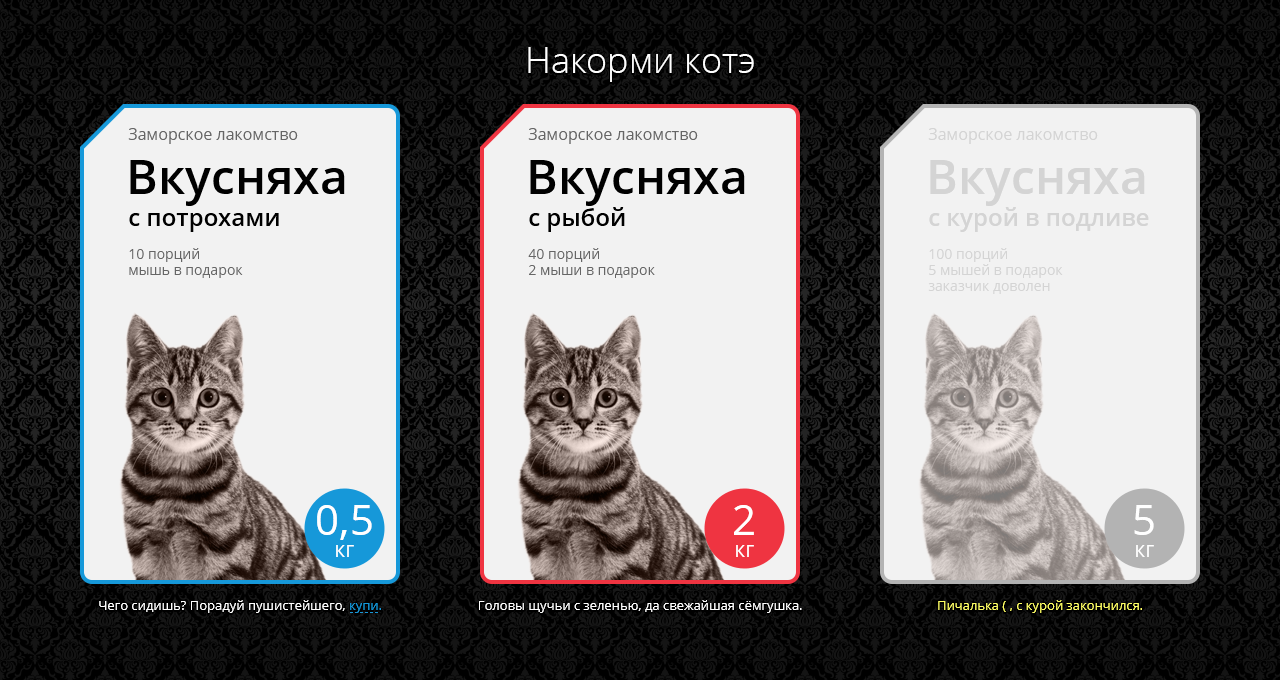
<style>
.page{position:relative;width:1280px;height:680px;background:#f2f2f2}
.page>*{position:absolute;margin:0}
.t1{font:36px "OpenSans-Light";color:#ffffff}
.t2{font:16px "OpenSans";color:#666666}
.t3{font:16px "OpenSans";color:#d4d4d4}
.t4{font:48px "OpenSans-Semibold";color:#000000}
.t5{font:48px "OpenSans-Semibold";color:#d4d4d4}
.t6{font:24px "OpenSans-Semibold";color:#000000}
.t7{font:24px "OpenSans-Semibold";color:#d4d4d4}
.t8{font:14px/16px "OpenSans";color:#666666}
.t9{font:14px/16px "OpenSans";color:#d4d4d4}
.t10{font:42px/22px "OpenSans";color:#ffffff}
.t11{font:21px/22px "OpenSans";color:#ffffff}
.t12{font:13px "OpenSans";color:#ffffff}
.t13{font:13px "OpenSans";color:#1698d9}
.t14{font:13px "OpenSans";color:#ffff66}
</style>
<div class="page">
<p class="t1" style="left:528px;top:47px;width:226px;height:35px">Накорми котэ</p>
<p class="t2" style="left:128px;top:128px;width:170px;height:16px">Заморское лакомство</p>
<p class="t2" style="left:528px;top:128px;width:170px;height:16px">Заморское лакомство</p>
<p class="t3" style="left:928px;top:128px;width:170px;height:16px">Заморское лакомство</p>
<p class="t4" style="left:130px;top:160px;width:215px;height:46px">Вкусняха</p>
<p class="t4" style="left:530px;top:160px;width:215px;height:46px">Вкусняха</p>
<p class="t5" style="left:930px;top:160px;width:215px;height:46px">Вкусняха</p>
<p class="t6" style="left:529px;top:207px;width:96px;height:25px">с рыбой</p>
<p class="t7" style="left:929px;top:207px;width:220px;height:25px">с курой в подливе</p>
<p class="t6" style="left:129px;top:213px;width:150px;height:19px">с потрохами</p>
<p class="t8" style="left:129px;top:248px;width:114px;height:30px">10 порций<br>мышь в подарок</p>
<p class="t8" style="left:528px;top:248px;width:127px;height:30px">40 порций<br>2 мыши в подарок</p>
<p class="t9" style="left:928px;top:248px;width:135px;height:46px">100 порций<br>5 мышей в подарок<br>заказчик доволен</p>
<p class="t10" style="left:317px;top:505px;width:55px;height:52px;text-align:center">0,5<br><span class="t11">кг</span></p>
<p class="t11" style="left:734px;top:505px;width:20px;height:52px;text-align:center"><span class="t10">2<br></span>кг</p>
<p class="t11" style="left:1134px;top:505px;width:20px;height:52px;text-align:center"><span class="t10">5<br></span>кг</p>
<p class="t12" style="left:99px;top:600px;width:282px;height:13px">Чего сидишь? Порадуй пушистейшего, <span class="t13">купи.</span></p>
<p class="t12" style="left:479px;top:600px;width:323px;height:13px">Головы щучьи с зеленью, да свежайшая сёмгушка.</p>
<p class="t14" style="left:938px;top:600px;width:204px;height:13px">Пичалька ( , с курой закончился.</p>
</div>
